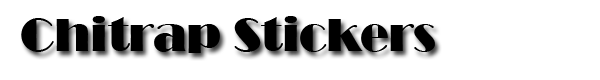
<style>
.page{position:relative;width:600px;height:80px;background:#ffffff}
.page>*{position:absolute;margin:0}
.t1{font:48px "Broadway";color:#000000}
</style>
<div class="page">
<p class="t1" style="left:21px;top:16px;width:414px;height:37px">Chitrap Stickers</p>
</div>
